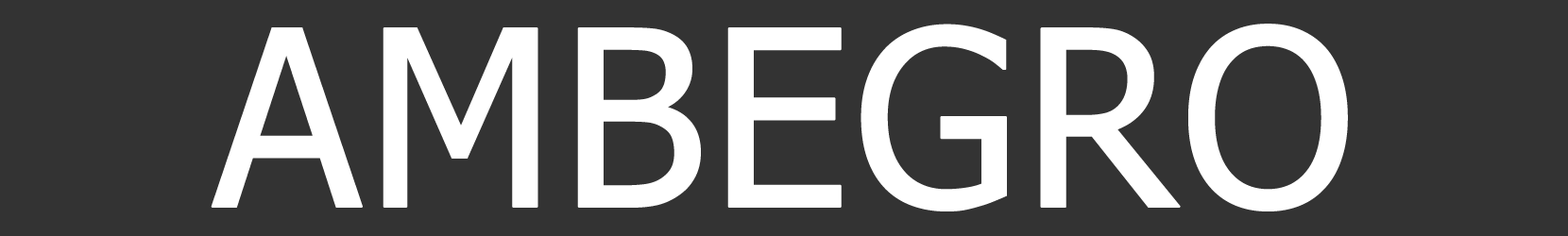
<style>
.page{position:relative;width:1568px;height:236px;background:#333333}
.page>*{position:absolute;margin:0}
.t1{font:245.6px "Tahoma";letter-spacing:-0.005em;color:#ffffff;text-transform:uppercase;font-weight:bold}
</style>
<div class="page">
<p class="t1" style="left:211px;top:24px;width:1137px;height:188px">AMBEGRO</p>
</div>
